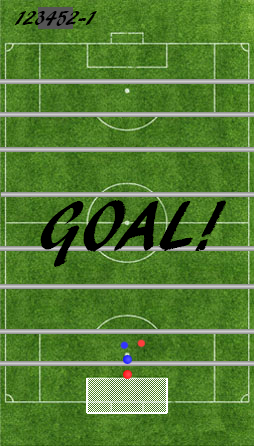
<style>
.page{position:relative;width:254px;height:446px}
.page>*{position:absolute;margin:0}
.t1{font:22px "ARBLANCA";color:#000000}
.t2{font:72px "ARBLANCA";color:#000000}
</style>
<div class="page">
<p class="t1" style="left:15px;top:11px;width:82px;height:15px">123452-1</p>
<p class="t2" style="left:40px;top:200px;width:187px;height:67px">GOAL!</p>
</div>
